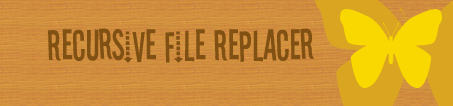
<style>
.page{position:relative;width:453px;height:106px}
.page>*{position:absolute;margin:0}
.t1{font:48px "Stereofidelic";color:#815113}
</style>
<div class="page">
<p class="t1" style="left:48px;top:28px;width:267px;height:35px">Recursive File Replacer</p>
</div>
